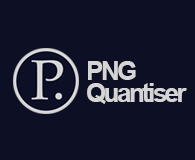
<style>
.page{position:relative;width:195px;height:160px;background:#0d0f25}
.page>*{position:absolute;margin:0}
.t1{font:26px/22px "Arial-BoldMT";letter-spacing:-0.1em;color:#d5d5d5}
</style>
<div class="page">
<p class="t1" style="left:87px;top:61px;width:100px;height:43px">PNG<br>Quantiser</p>
</div>
